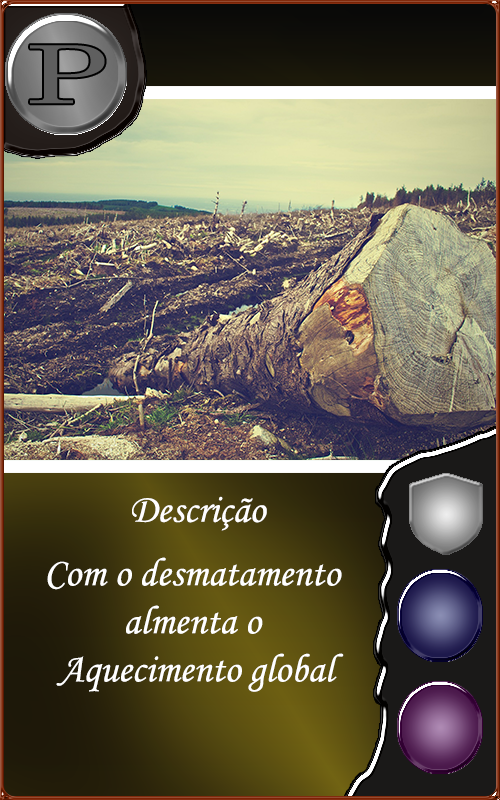
<style>
.page{position:relative;width:500px;height:800px}
.page>*{position:absolute;margin:0}
.t1{font:40px "MonotypeCorsiva";color:#fffefe}
.t2{font:40px "MonotypeCorsiva";color:#ffffff}
</style>
<div class="page">
<p class="t1" style="left:132px;top:496px;width:135px;height:35px">Descrição</p>
<p class="t2" style="left:47px;top:557px;width:297px;height:135px;text-align:center">Com o desmatamento <br>almenta o <br>Aquecimento global</p>
</div>
